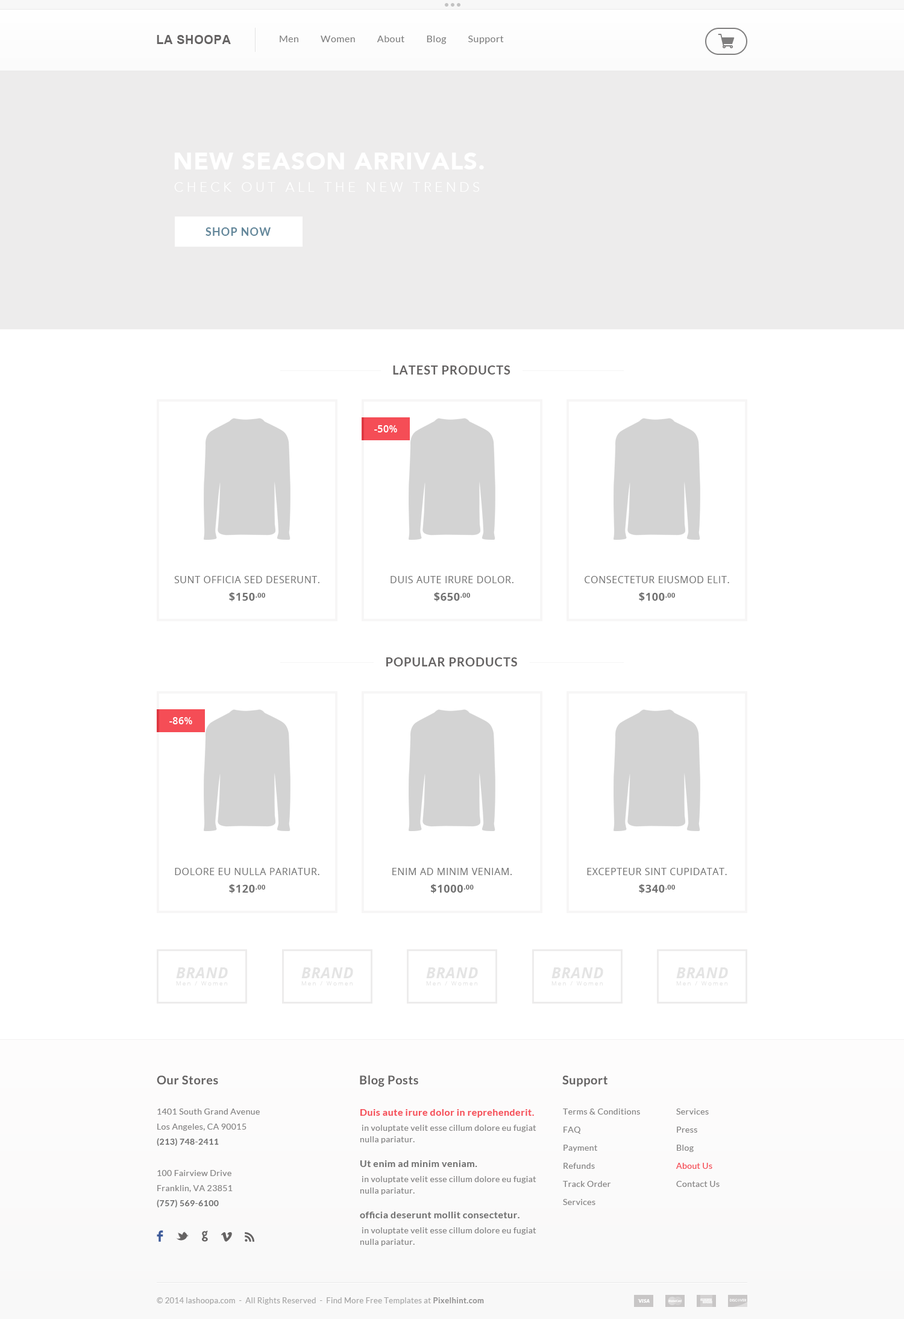
<style>
.page{position:relative;width:904px;height:1319px;background:#ffffff}
.page>*{position:absolute;margin:0}
.t1{font:12.1px "Arial-BoldMT";letter-spacing:0.03em;color:#656363;text-transform:uppercase}
.t2{font:9.6px "Lato-Regular";letter-spacing:0.03em;color:#7f7f7f}
.t3{font:24.1px "AvenirLT-Black";letter-spacing:0.03em;color:#ffffff;text-transform:uppercase}
.t4{font:13.3px "AvenirLT-Light";letter-spacing:0.245em;color:#ffffff;text-transform:uppercase}
.t5{font:10.9px "Lato-Bold";letter-spacing:0.07em;color:#65889b;text-transform:uppercase}
.t6{font:12.1px "Lato-Bold";letter-spacing:0.05em;color:#656363;text-transform:uppercase}
.t7{font:9.6px "OpenSans-Semibold";letter-spacing:0.03em;color:#ffffff}
.t8{font:9.6px "OpenSans";letter-spacing:0.04em;color:#717171;text-transform:uppercase}
.t9{font:10.9px "OpenSans-Bold";letter-spacing:0.04em;color:#717171;text-transform:uppercase}
.t10{font:11.5px "OpenSans-Bold";letter-spacing:0.04em;color:#717171;text-transform:uppercase}
.t11{font:6px "OpenSans-Light";letter-spacing:0.22em;color:#e4e4e4}
.t12{font:15.1px "OpenSans-BoldItalic";letter-spacing:0.04em;color:#e4e4e4;text-transform:uppercase}
.t13{font:12.1px "Lato-Bold";letter-spacing:0.03em;color:#656363}
.t14{font:8.4px/15.1px "Lato-Regular";letter-spacing:0.03em;color:#868585}
.t15{font:8.4px/15.1px "Lato-Bold";letter-spacing:0.03em;color:#717171}
.t16{font:9.6px/15.1px "Lato-Bold";letter-spacing:0.03em;color:#f54d56}
.t17{font:8.4px/11.5px "Lato-Regular";letter-spacing:0.03em;color:#868585}
.t18{font:8.4px/18.1px "Lato-Regular";letter-spacing:0.03em;color:#868585}
.t19{font:8.4px/18.1px "Lato-Regular";letter-spacing:0.03em;color:#f54d56}
.t20{font:9.6px/15.1px "Lato-Bold";letter-spacing:0.03em;color:#717171}
.t21{font:18.1px "Socialico";letter-spacing:0.03em;color:#656363}
.t22{font:18.1px "Socialico";letter-spacing:0.03em;color:#3d5a99}
.t23{font:15.7px "Socialico";letter-spacing:0.03em;color:#656363}
.t24{font:7.8px "Lato-Regular";letter-spacing:0.03em;color:#a6a6a6}
.t25{font:7.8px "Lato-Bold";letter-spacing:0.03em;color:#939292}
</style>
<div class="page">
<p class="t1" style="left:157px;top:35px;width:74px;height:9px">La Shoopa</p>
<p class="t2" style="left:280px;top:36px;width:224px;height:8px">Men          Women          About          Blog          Support</p>
<p class="t3" style="left:174px;top:153px;width:310px;height:16px">NEW SEASON ARRIVALS.</p>
<p class="t4" style="left:174px;top:182px;width:306px;height:10px">CHECK OUT ALL THE NEW TRENDS</p>
<p class="t5" style="left:206px;top:227px;width:65px;height:9px">Shop Now</p>
<p class="t6" style="left:393px;top:365px;width:118px;height:9px">Latest Products</p>
<p class="t7" style="left:374px;top:425px;width:23px;height:7px">-50%</p>
<p class="t8" style="left:174px;top:576px;width:146px;height:7px">Sunt Officia sed deserunt.</p>
<p class="t8" style="left:391px;top:576px;width:123px;height:7px">Duis aute irure dolor.</p>
<p class="t8" style="left:585px;top:576px;width:145px;height:7px">consectetur eiusmod elit.</p>
<p class="t9" style="left:229px;top:592px;width:36px;height:9px">$150<span class="t10">.00</span></p>
<p class="t9" style="left:434px;top:592px;width:36px;height:9px">$650<span class="t10">.00</span></p>
<p class="t9" style="left:639px;top:592px;width:36px;height:9px">$100<span class="t10">.00</span></p>
<p class="t6" style="left:386px;top:657px;width:131px;height:9px">Popular Products</p>
<p class="t7" style="left:169px;top:717px;width:23px;height:7px">-86%</p>
<p class="t8" style="left:175px;top:868px;width:145px;height:7px">dolore eu nulla pariatur.</p>
<p class="t8" style="left:392px;top:868px;width:120px;height:7px">enim ad minim veniam.</p>
<p class="t8" style="left:587px;top:868px;width:140px;height:7px">Excepteur sint cupidatat.</p>
<p class="t9" style="left:229px;top:884px;width:36px;height:9px">$120<span class="t10">.00</span></p>
<p class="t9" style="left:431px;top:884px;width:43px;height:9px">$1000<span class="t10">.00</span></p>
<p class="t9" style="left:639px;top:884px;width:36px;height:9px">$340<span class="t10">.00</span></p>
<p class="t11" style="left:176px;top:967px;width:52px;height:18px"><span class="t12">BRAND<br></span>Men / Women</p>
<p class="t11" style="left:301px;top:967px;width:52px;height:18px"><span class="t12">BRAND<br></span>Men / Women</p>
<p class="t11" style="left:426px;top:967px;width:52px;height:18px"><span class="t12">BRAND<br></span>Men / Women</p>
<p class="t11" style="left:552px;top:967px;width:52px;height:18px"><span class="t12">BRAND<br></span>Men / Women</p>
<p class="t11" style="left:676px;top:967px;width:52px;height:18px"><span class="t12">BRAND<br></span>Men / Women</p>
<p class="t13" style="left:157px;top:1075px;width:61px;height:9px">Our Stores</p>
<p class="t13" style="left:360px;top:1075px;width:58px;height:11px">Blog Posts</p>
<p class="t13" style="left:563px;top:1075px;width:45px;height:11px">Support</p>
<p class="t14" style="left:157px;top:1108px;width:103px;height:38px">1401 South Grand Avenue <br>Los Angeles, CA 90015 <br><span class="t15">(213) 748-2411</span></p>
<p class="t14" style="left:360px;top:1109px;width:177px;height:34px"><span class="t16">Duis aute irure dolor in reprehenderit.<br></span> in voluptate velit esse cillum dolore eu fugiat<span class="t17"> nulla pariatur.</span></p>
<p class="t18" style="left:563px;top:1108px;width:77px;height:97px">Terms &amp; Conditions<br>FAQ<br>Payment<br>Refunds<br>Track Order<br>Services</p>
<p class="t18" style="left:676px;top:1108px;width:44px;height:79px">Services<br>Press<br>Blog<br><span class="t19">About Us<br></span>Contact Us</p>
<p class="t14" style="left:157px;top:1170px;width:76px;height:38px">100 Fairview Drive <br>Franklin, VA 23851 <br><span class="t15">(757) 569-6100</span></p>
<p class="t14" style="left:360px;top:1160px;width:177px;height:34px"><span class="t20">Ut enim ad minim veniam.<br></span> in voluptate velit esse cillum dolore eu fugiat<span class="t17"> nulla pariatur.</span></p>
<p class="t14" style="left:360px;top:1211px;width:177px;height:35px"><span class="t20">officia deserunt mollit consectetur.<br></span> in voluptate velit esse cillum dolore eu fugiat<span class="t17"> nulla pariatur.</span></p>
<p class="t21" style="left:157px;top:1230px;width:97px;height:11px"><span class="t22">F  </span>L  G  <span class="t23">V  R</span></p>
<p class="t24" style="left:157px;top:1297px;width:327px;height:7px">© 2014 lashoopa.com  -  All Rights Reserved  -  Find More Free Templates at <span class="t25">Pixelhint.com</span></p>
</div>
